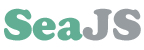
<style>
.page{position:relative;width:144px;height:50px;background:#ffffff}
.page>*{position:absolute;margin:0}
.t1{font:46px "CooperBlack";color:#61ae95}
.t2{font:46px "CooperBlack";color:#979ca0}
</style>
<div class="page">
<p class="t1" style="left:4px;top:8px;width:137px;height:33px">Sea<span class="t2">JS</span></p>
</div>
